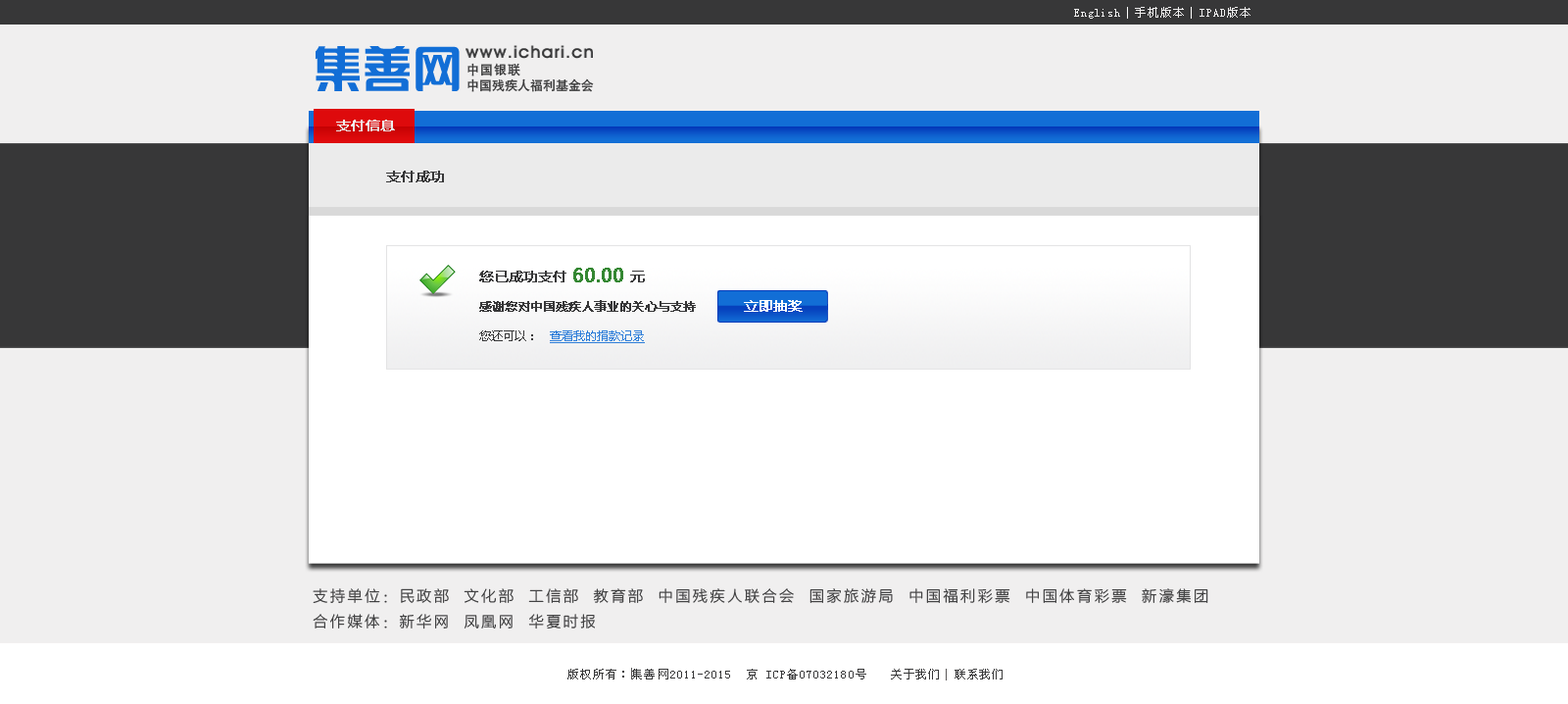
<style>
.page{position:relative;width:1568px;height:704px;background:#f0efef}
.page>*{position:absolute;margin:0}
.t1{font:11.8px "SimSun";letter-spacing:0.09em;color:#f0efef}
.t2{font:11.8px "SimSun";letter-spacing:0.07em;color:#f0efef}
.t3{font:12.7px "HeitiCSEG-Medium-GB";letter-spacing:0.08em;color:#373738}
.t4{font:12.7px "HeitiCSEG-Medium-GB";color:#373738}
.t5{font:13.7px "MicrosoftYaHei";color:#f0efef;font-weight:bold}
.t6{font:13.7px "MicrosoftYaHei";color:#373738;font-weight:bold}
.t7{font:11.8px/29.4px "MicrosoftYaHei";color:#373738;font-weight:bold}
.t8{font:13.7px/29.4px "MicrosoftYaHei";color:#373738;font-weight:bold}
.t9{font:17.6px/29.4px "MicrosoftYaHei";color:#348732;font-weight:bold}
.t10{font:11.8px/29.4px "MicrosoftYaHei";color:#373738}
.t11{font:11.8px/29.4px "MicrosoftYaHei";color:#2e7ed9;text-decoration:underline}
.t12{font:13.7px "MicrosoftYaHei";color:#ffffff;font-weight:bold}
.t13{font:15px/25.2px "FZLTXHK--GBK1-0";letter-spacing:0.15em;color:#373738}
.t14{font:11.8px "SimSun";letter-spacing:0.09em;color:#373738}
.t15{font:11.8px "SimSun";letter-spacing:0.07em;color:#373738}
</style>
<div class="page">
<p class="t1" style="left:1074px;top:7px;width:176px;height:12px"><span class="t2">English  </span>手机版本  IPAD版本</p>
<p class="t3" style="left:467px;top:63px;width:53px;height:13px">中国银联</p>
<p class="t4" style="left:467px;top:78px;width:127px;height:14px">中国残疾人福利基金会</p>
<p class="t5" style="left:336px;top:120px;width:59px;height:11px">支付信息</p>
<p class="t6" style="left:386px;top:171px;width:58px;height:11px">支付成功</p>
<p class="t7" style="left:479px;top:268px;width:217px;height:75px"><span class="t8">您已成功支付 </span><span class="t9">60.00 </span><span class="t8">元<br></span>感谢您对中国残疾人事业的关心与支持<br><span class="t10">您还可以：   </span><span class="t11">查看我的捐款记录</span></p>
<p class="t12" style="left:744px;top:300px;width:59px;height:12px">立即抽奖</p>
<p class="t13" style="left:313px;top:588px;width:895px;height:41px">支持单位：民政部  文化部  工信部  教育部  中国残疾人联合会  国家旅游局  中国福利彩票  中国体育彩票  新濠集团  <br>合作媒体：新华网  凤凰网  华夏时报</p>
<p class="t14" style="left:567px;top:668px;width:299px;height:11px">版权所有：集善网2011-2015  京 ICP备07032180号</p>
<p class="t15" style="left:891px;top:668px;width:112px;height:11px">关于我们  联系我们</p>
</div>
